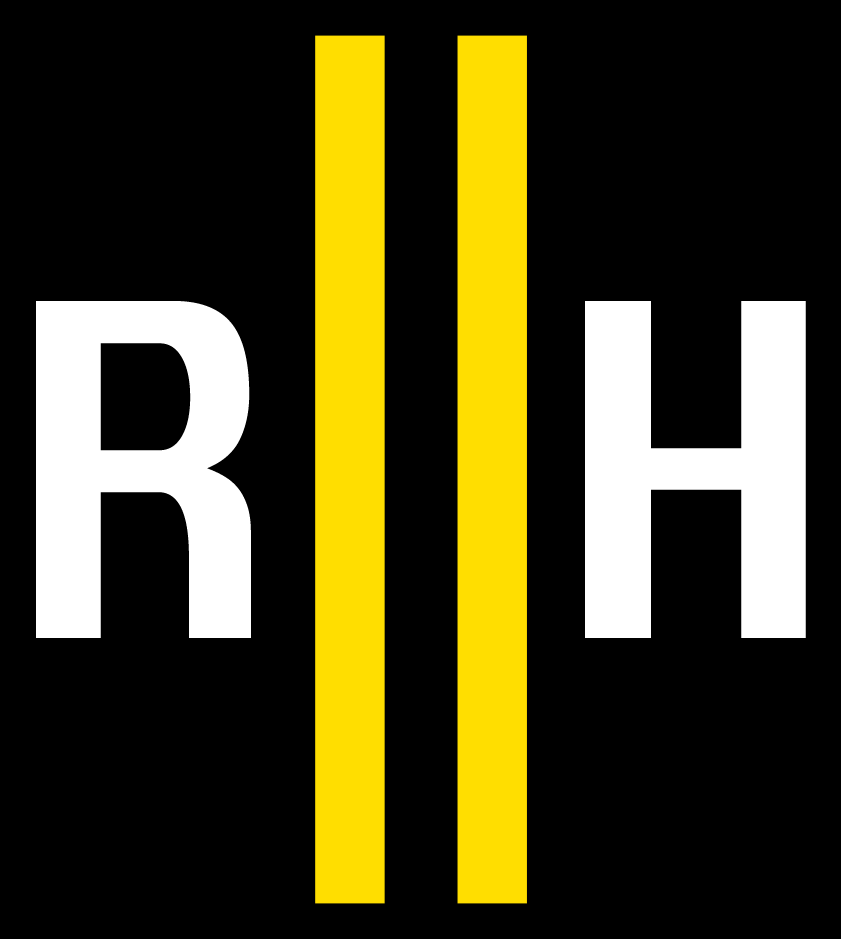
<style>
.page{position:relative;width:841px;height:939px;background:#000000}
.page>*{position:absolute;margin:0}
.t1{font:416.6px "Unispace-Bold";color:#ffffff}
</style>
<div class="page">
<p class="t1" style="left:36px;top:301px;width:215px;height:337px">R</p>
<p class="t1" style="left:585px;top:301px;width:221px;height:337px">H</p>
</div>
